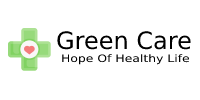
<style>
.page{position:relative;width:200px;height:100px;background:#ffffff}
.page>*{position:absolute;margin:0}
.t1{font:24px "DejaVuSans";color:#000000}
.t2{font:10.2px "DejaVuSans";color:#000000;scale:1.21 1}
</style>
<div class="page">
<p class="t1" style="left:57px;top:31px;width:134px;height:19px">Green Care</p>
<p class="t2" style="left:62px;top:54px;width:128px;height:11px">Hope Of Healthy Life</p>
</div>
